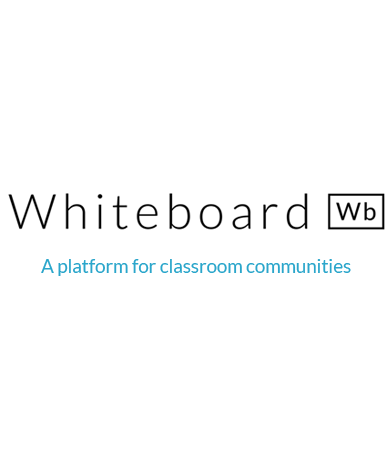
<style>
.page{position:relative;width:390px;height:450px;background:#ffffff}
.page>*{position:absolute;margin:0}
.t1{font:18.7px "Lato-Regular";color:#2ba6cb}
</style>
<div class="page">
<p class="t1" style="left:41px;top:259px;width:310px;height:17px">A platform for classroom communities</p>
</div>
